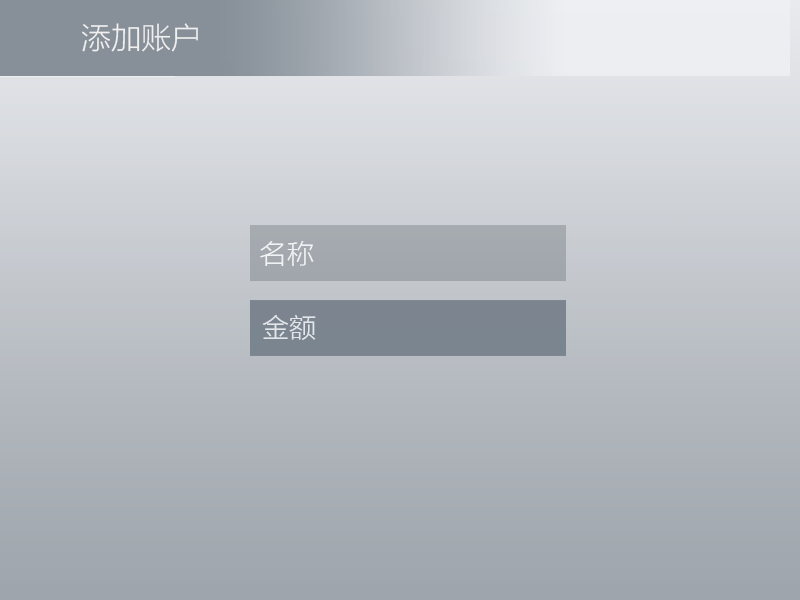
<style>
.page{position:relative;width:800px;height:600px}
.page>*{position:absolute;margin:0}
.t1{font:30px "MicrosoftYaHeiLight";color:#f1f0f0}
.t2{font:27.1px "MicrosoftYaHeiLight";color:#f0f2f3}
.t3{font:27.1px "MicrosoftYaHeiLight";color:#e2e6eb}
</style>
<div class="page">
<p class="t1" style="left:82px;top:23px;width:116px;height:29px">添加账户</p>
<p class="t2" style="left:260px;top:241px;width:54px;height:25px">名称</p>
<p class="t3" style="left:262px;top:315px;width:54px;height:25px">金额</p>
</div>
